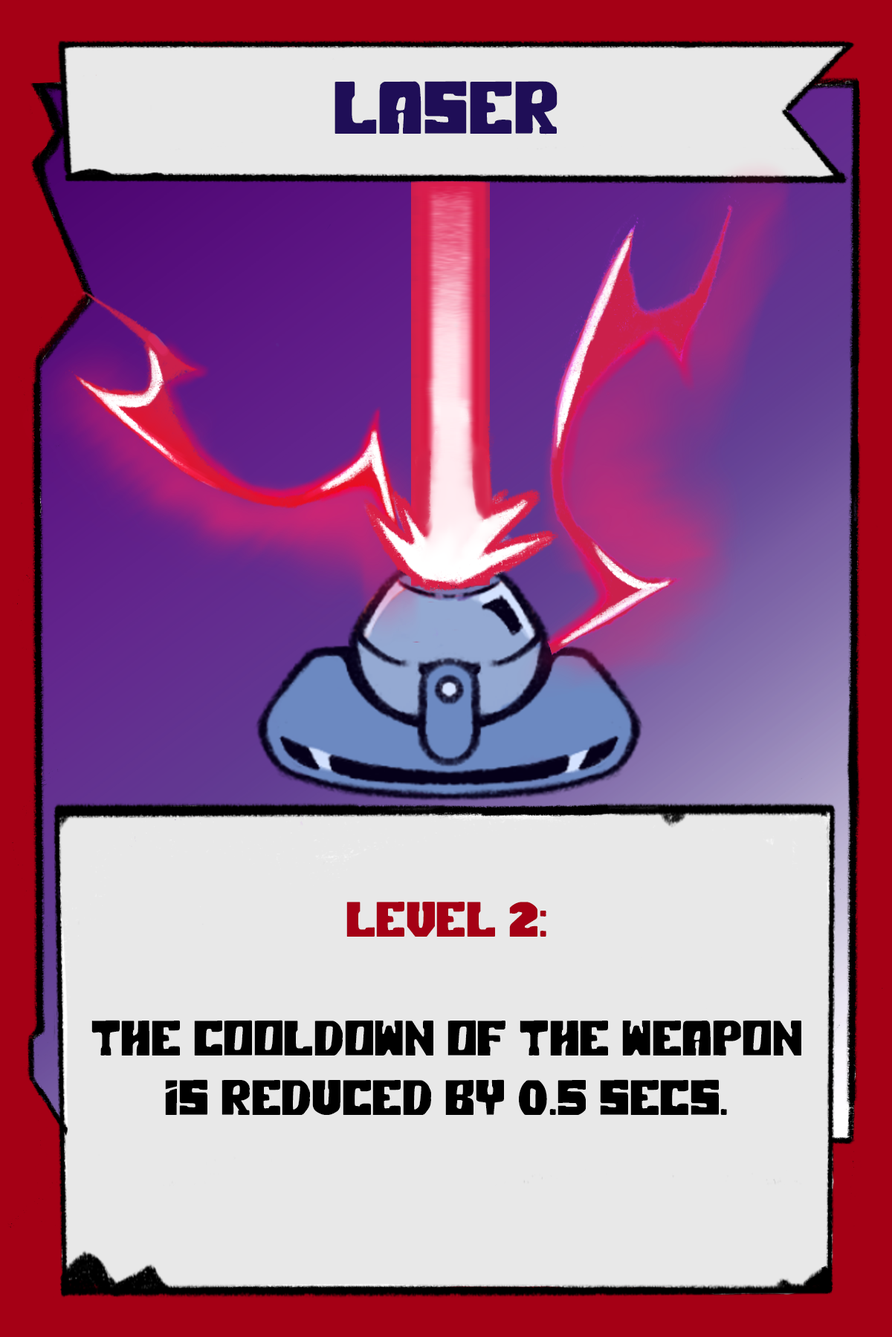
<style>
.page{position:relative;width:892px;height:1337px;background:#e8e8e8}
.page>*{position:absolute;margin:0}
.t1{font:74.3px "PolarPress";color:#1f0e57}
.t2{font:49.5px "PolarPress";color:#000000}
.t3{font:49.5px "PolarPress";color:#a50015}
</style>
<div class="page">
<p class="t1" style="left:334px;top:81px;width:223px;height:53px">LASER</p>
<p class="t2" style="left:91px;top:902px;width:710px;height:213px;text-align:center"><span class="t3">LEVEL 2:<br><br></span>the cooldown of the weapon is reduced by 0.5 secs.</p>
</div>
